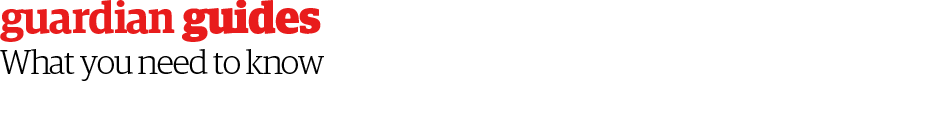
<style>
.page{position:relative;width:940px;height:120px;background:#ffffff}
.page>*{position:absolute;margin:0}
.t1{font:44px "DE5DisplayEgyptianSemiBold";letter-spacing:-0.02em;color:#e81c1c}
.t2{font:44px "DE7DisplayEgyptianBlack";letter-spacing:-0.02em;color:#e81c1c}
.t3{font:34px "DE2DisplayEgyptianLight";letter-spacing:-0.02em;color:#000000}
</style>
<div class="page">
<p class="t1" style="left:0px;top:0px;width:321px;height:42px">guardian <span class="t2">guides</span></p>
<p class="t3" style="left:0px;top:49px;width:324px;height:32px">What you need to know</p>
</div>
